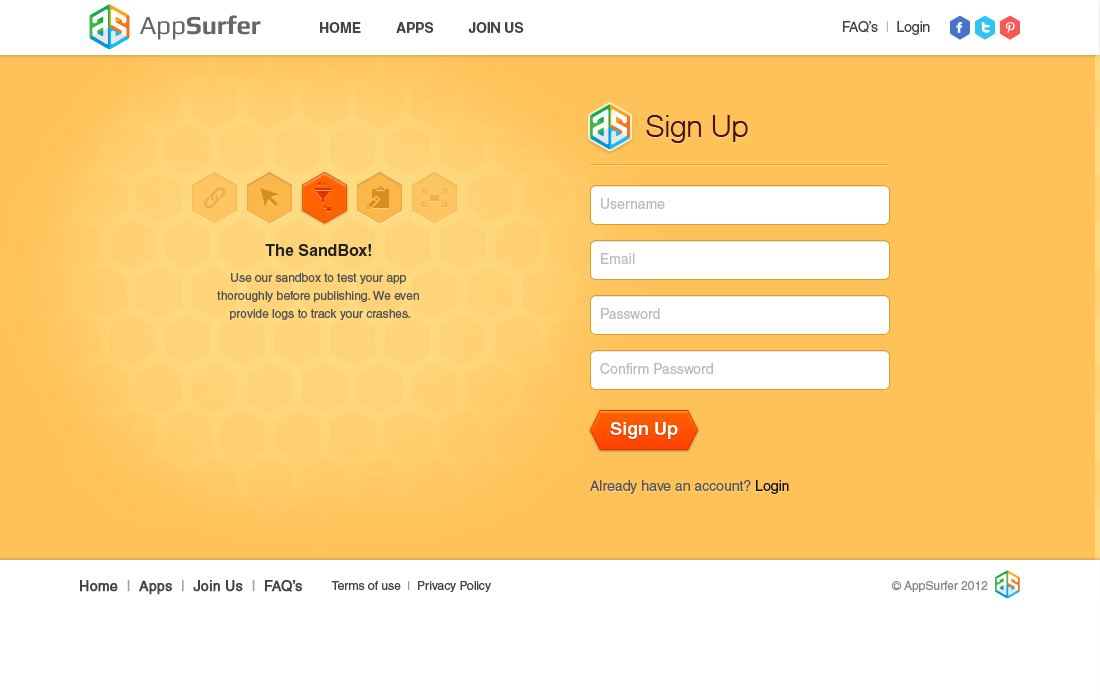
<style>
.page{position:relative;width:1100px;height:700px;background:#ffffff}
.page>*{position:absolute;margin:0}
.t1{font:26px "Play-Bold";letter-spacing:-0.01em;color:#666666}
.t2{font:26px "Play";letter-spacing:-0.01em;color:#666666}
.t3{font:14px "Helvetica-Bold";letter-spacing:-0.01em;color:#444444;text-transform:uppercase}
.t4{font:14px "Helvetica";letter-spacing:-0.01em;color:#444444}
.t5{font:14px "Helvetica";letter-spacing:-0.01em;color:#bbbbbb}
.t6{font:30px "HelveticaNeue-Light";color:#431313}
.t7{font:14px "Helvetica";color:#bbbbbb}
.t8{font:16px "Helvetica-Bold";color:#222222}
.t9{font:12px/18px "Helvetica";color:#555555}
.t10{font:18px "Helvetica-Bold";color:#ffffff}
.t11{font:14px "Helvetica";color:#555555}
.t12{font:14px "Helvetica";color:#111111}
.t13{font:14px "Helvetica";color:#444444;font-weight:bold}
.t14{font:14px "Helvetica";color:#a4a4a4;font-weight:bold}
.t15{font:12px "Helvetica";color:#444444}
.t16{font:12px "Helvetica";color:#9a9a9a}
.t17{font:12px "Helvetica";color:#888888}
</style>
<div class="page">
<p class="t1" style="left:140px;top:15px;width:121px;height:25px"><span class="t2">App</span>Surfer</p>
<p class="t3" style="left:320px;top:22px;width:41px;height:11px">Home</p>
<p class="t3" style="left:396px;top:22px;width:38px;height:11px">Apps</p>
<p class="t3" style="left:468px;top:22px;width:56px;height:11px">Join Us</p>
<p class="t4" style="left:843px;top:21px;width:87px;height:14px">FAQ’s  <span class="t5">| </span> Login</p>
<p class="t6" style="left:646px;top:115px;width:102px;height:28px">Sign Up</p>
<p class="t7" style="left:601px;top:198px;width:64px;height:11px">Username</p>
<p class="t8" style="left:265px;top:244px;width:106px;height:12px">The SandBox!</p>
<p class="t7" style="left:601px;top:253px;width:34px;height:11px">Email</p>
<p class="t9" style="left:217px;top:273px;width:202px;height:47px;text-align:center">Use our sandbox to test your app <br>thoroughly before publishing. We even <br>provide logs to track your crashes.</p>
<p class="t7" style="left:601px;top:308px;width:59px;height:11px">Password</p>
<p class="t7" style="left:600px;top:363px;width:113px;height:11px">Confirm Password</p>
<p class="t10" style="left:610px;top:422px;width:68px;height:17px">Sign Up</p>
<p class="t11" style="left:590px;top:480px;width:199px;height:14px">Already have an account? <span class="t12">Login</span></p>
<p class="t13" style="left:80px;top:580px;width:222px;height:15px">Home  <span class="t14">|  </span>Apps  <span class="t14">|  </span>Join Us  <span class="t14">|  </span>FAQ’s</p>
<p class="t15" style="left:331px;top:581px;width:160px;height:11px">Terms of use <span class="t16"> |  </span>Privacy Policy</p>
<p class="t17" style="left:891px;top:580px;width:97px;height:12px">© AppSurfer 2012</p>
</div>
